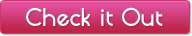
<style>
.page{position:relative;width:192px;height:36px}
.page>*{position:absolute;margin:0}
.t1{font:24px "Quadranta-Bold";color:#ffffff}
</style>
<div class="page">
<p class="t1" style="left:26px;top:7px;width:137px;height:19px">Check it Out</p>
</div>
